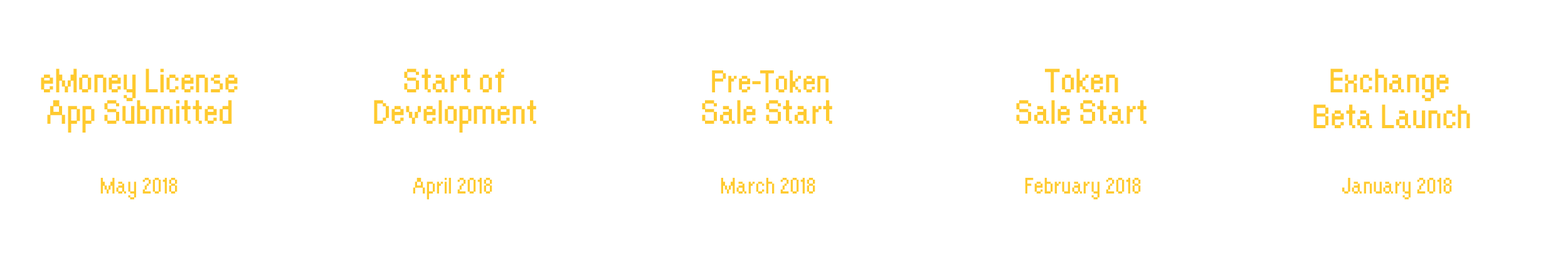
<style>
.page{position:relative;width:1568px;height:262px;background:#ffffff}
.page>*{position:absolute;margin:0}
.t1{font:39.2px "OrangeKid-Regular";color:#ffca2f}
.t2{font:36.6px "OrangeKid-Regular";color:#ffca2f}
.t3{font:26.1px "OrangeKid-Regular";color:#ffca2f}
</style>
<div class="page">
<p class="t1" style="left:41px;top:68px;width:197px;height:33px">eMoney License</p>
<p class="t1" style="left:404px;top:68px;width:100px;height:24px">Start of</p>
<p class="t2" style="left:712px;top:70px;width:117px;height:23px">Pre-Token</p>
<p class="t1" style="left:1045px;top:68px;width:73px;height:25px">Token</p>
<p class="t1" style="left:1330px;top:68px;width:119px;height:33px">Exchange</p>
<p class="t1" style="left:47px;top:100px;width:185px;height:32px">App Submitted</p>
<p class="t1" style="left:374px;top:100px;width:162px;height:32px">Development</p>
<p class="t1" style="left:702px;top:100px;width:130px;height:24px">Sale Start</p>
<p class="t1" style="left:1016px;top:100px;width:131px;height:24px">Sale Start</p>
<p class="t1" style="left:1313px;top:104px;width:157px;height:24px">Beta Launch</p>
<p class="t3" style="left:100px;top:177px;width:77px;height:22px">May 2018</p>
<p class="t3" style="left:413px;top:177px;width:79px;height:22px">April 2018</p>
<p class="t3" style="left:721px;top:177px;width:94px;height:16px">March 2018</p>
<p class="t3" style="left:1025px;top:177px;width:116px;height:22px">February 2018</p>
<p class="t3" style="left:1342px;top:177px;width:110px;height:22px">January 2018</p>
</div>
